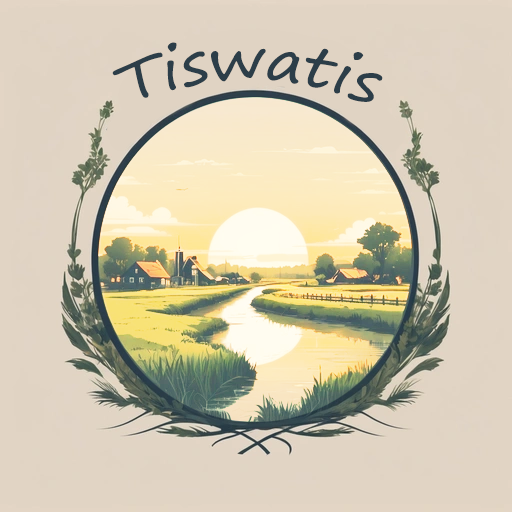
<style>
.page{position:relative;width:512px;height:512px;background:#e1d4c4}
.page>*{position:absolute;margin:0}
.t1{font:55.3px "SegoePrint";color:#2c3e49}
</style>
<div class="page">
<p class="t1" style="left:112px;top:42px;width:271px;height:60px">Tiswatis</p>
</div>
